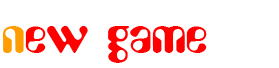
<style>
.page{position:relative;width:279px;height:68px;background:#ffffff}
.page>*{position:absolute;margin:0}
.t1{font:48px "Asimov";color:#ff0000}
.t2{font:48px "Asimov";color:#ff9c00}
</style>
<div class="page">
<p class="t1" style="left:3px;top:26px;width:204px;height:37px"><span class="t2">n</span>ew game</p>
</div>
